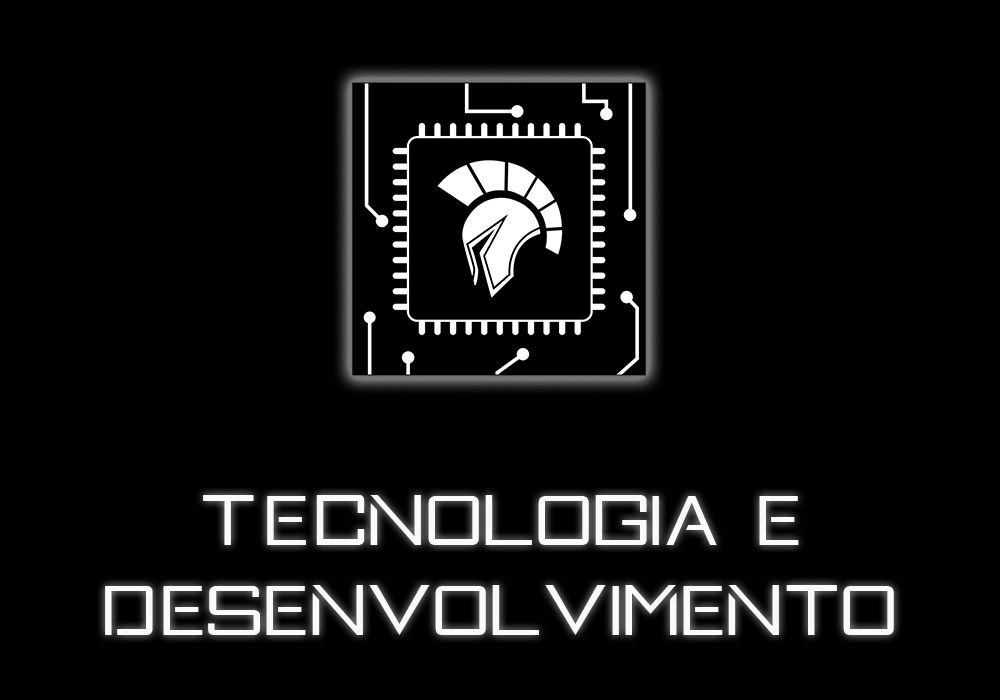
<style>
.page{position:relative;width:1000px;height:700px;background:#000000}
.page>*{position:absolute;margin:0}
.t1{font:71.5px "Xperia";color:#faf9f9}
</style>
<div class="page">
<p class="t1" style="left:203px;top:495px;width:596px;height:50px">TEcnologia e</p>
<p class="t1" style="left:105px;top:585px;width:789px;height:50px">Desenvolvimento</p>
</div>
